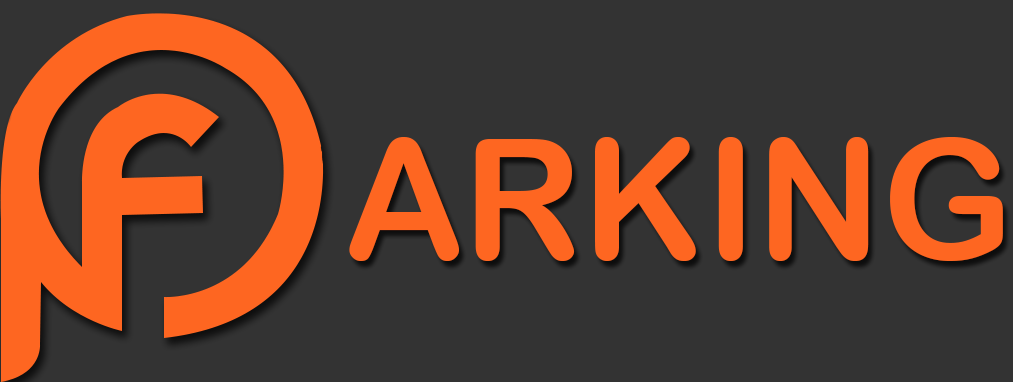
<style>
.page{position:relative;width:1013px;height:382px;background:#333333}
.page>*{position:absolute;margin:0}
.t1{font:166.7px "ArialRoundedMTBold";color:#fe6621}
</style>
<div class="page">
<p class="t1" style="left:349px;top:137px;width:654px;height:124px">ARKING</p>
</div>
